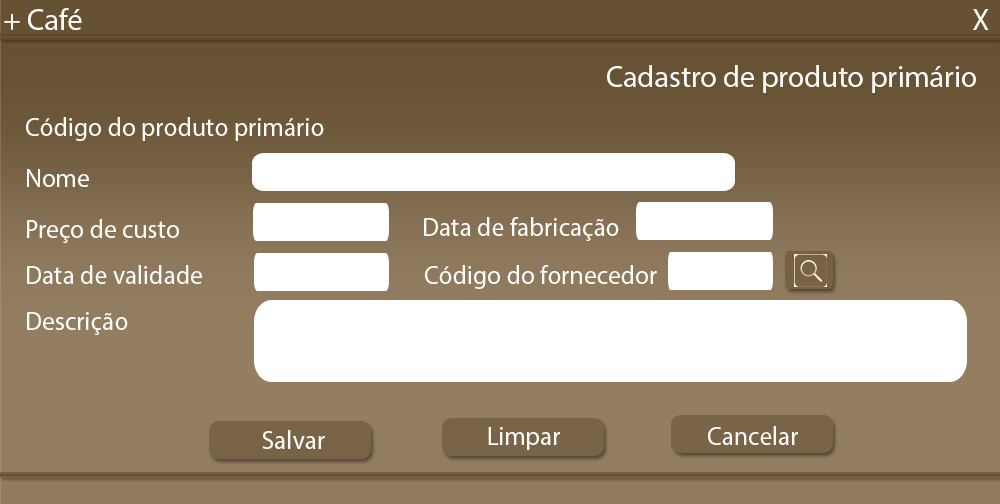
<style>
.page{position:relative;width:1000px;height:504px}
.page>*{position:absolute;margin:0}
.t1{font:30px "MyriadPro-Regular";color:#fefdfb}
.t2{font:30.1px "MyriadPro-Regular";color:#fefdfb}
.t3{font:29.9px "MyriadPro-Regular";color:#fefdfb}
.t4{font:25.7px "MyriadPro-Regular";color:#fefdfb}
.t5{font:55.1px "MyriadPro-Regular";color:#fefdfb}
</style>
<div class="page">
<p class="t1" style="left:4px;top:8px;width:78px;height:22px">+ Café</p>
<p class="t2" style="left:973px;top:9px;width:16px;height:21px">X</p>
<p class="t3" style="left:607px;top:65px;width:369px;height:28px">Cadastro de produto primário</p>
<p class="t4" style="left:26px;top:117px;width:298px;height:24px">Código do produto primário<br><br><span class="t5">Non</span></p>
<p class="t4" style="left:27px;top:169px;width:62px;height:18px">Nome<br><span class="t5">Non</span></p>
<p class="t4" style="left:27px;top:219px;width:152px;height:24px">Preço de custo<br><span class="t5">Non</span></p>
<p class="t4" style="left:424px;top:217px;width:195px;height:24px">Data de fabricação<br><br><span class="t5">Non</span></p>
<p class="t4" style="left:27px;top:265px;width:175px;height:19px">Data de validade<br><br><span class="t5">Non</span></p>
<p class="t4" style="left:425px;top:265px;width:232px;height:24px">Código do fornecedor<br><br><br><span class="t5">Non</span></p>
<p class="t4" style="left:27px;top:312px;width:101px;height:23px">Descrição<br><span class="t5">Non</span></p>
<p class="t4" style="left:262px;top:430px;width:63px;height:19px">Salvar<br><br><br><span class="t5">Non</span></p>
<p class="t4" style="left:488px;top:427px;width:72px;height:23px">Limpar<br><br><br><span class="t5">Non</span></p>
<p class="t4" style="left:708px;top:426px;width:90px;height:19px">Cancelar<br><br><br><br><span class="t5">Non</span></p>
</div>
